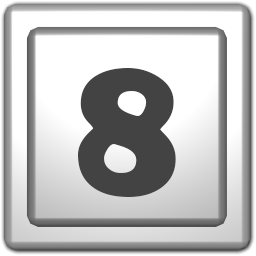
<style>
.page{position:relative;width:256px;height:256px;background:#ffffff}
.page>*{position:absolute;margin:0}
.t1{font:208.2px "BerlinSansFBDemi-Bold";color:#434343}
</style>
<div class="page">
<p class="t1" style="left:78px;top:68px;width:98px;height:129px">8</p>
</div>
